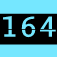
<style>
.page{position:relative;width:57px;height:57px;background:#75e7ff}
.page>*{position:absolute;margin:0}
.t1{font:29.2px "Solari";color:#000000}
</style>
<div class="page">
<p class="t1" style="left:0px;top:13px;width:58px;height:32px">164</p>
</div>
